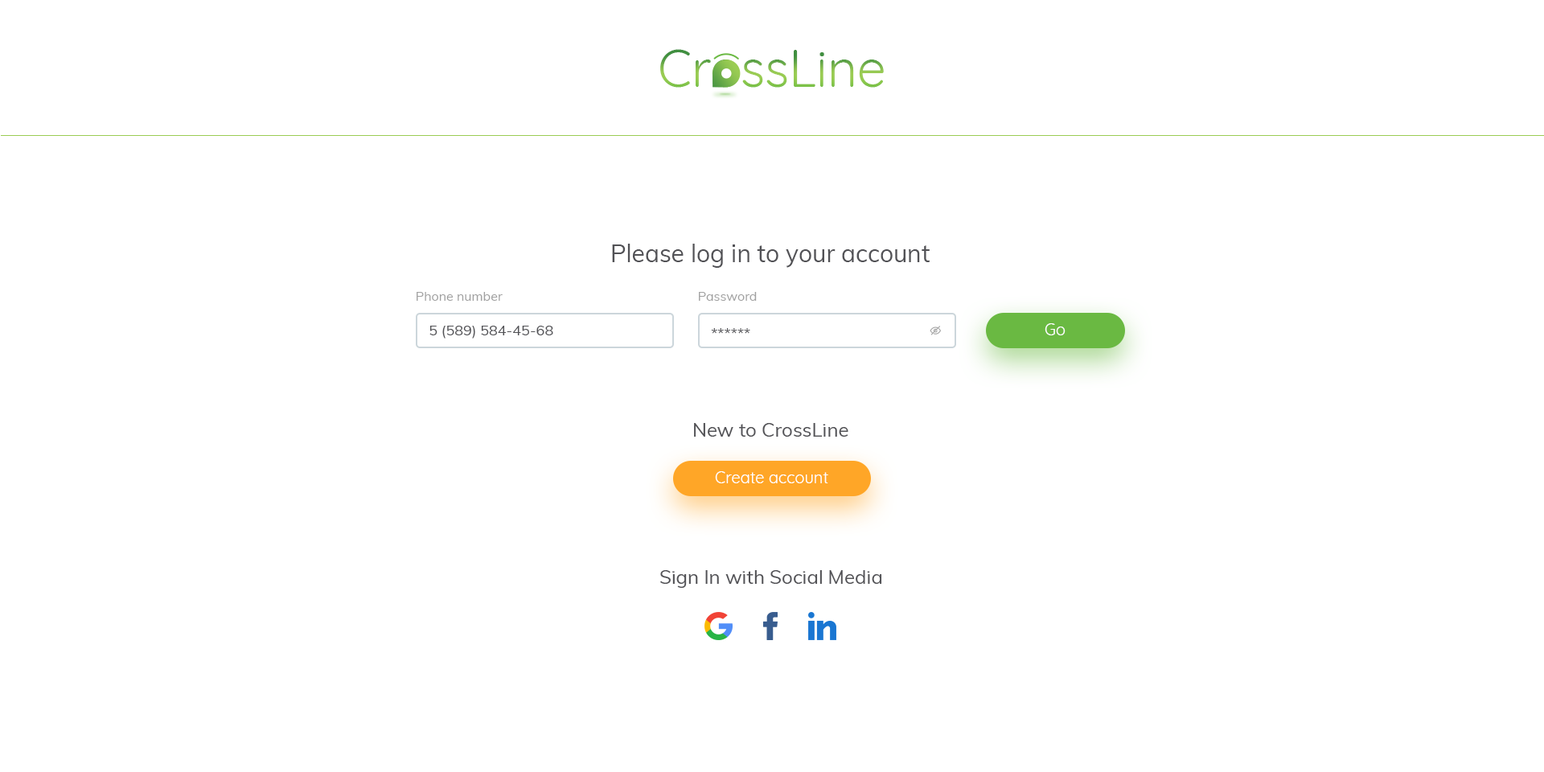
<style>
.page{position:relative;width:1544px;height:772px;background:#ffffff}
.page>*{position:absolute;margin:0}
.t1{font:51.6px "Quicksand-Regular"}
.t2{font:24.1px "Muli-Regular";color:#525256}
.t3{font:12.9px "Muli-Regular";color:#a1a1a1}
.t4{font:14.5px "Muli-Regular";color:#525256}
.t5{font:16.1px "Quicksand-Regular";color:#ffffff}
.t6{font:19.3px "Muli-Regular";color:#525256}
</style>
<div class="page">
<p class="t1" style="left:660px;top:49px;width:224px;height:39px">CrossLine</p>
<p class="t2" style="left:612px;top:244px;width:318px;height:24px">Please log in to your account</p>
<p class="t3" style="left:417px;top:292px;width:86px;height:9px">Phone number</p>
<p class="t3" style="left:699px;top:292px;width:58px;height:9px">Password</p>
<p class="t4" style="left:430px;top:326px;width:123px;height:13px">5 (589) 584-45-68</p>
<p class="t4" style="left:711px;top:328px;width:39px;height:6px">******</p>
<p class="t5" style="left:1045px;top:323px;width:21px;height:12px">Go</p>
<p class="t6" style="left:694px;top:423px;width:155px;height:14px">New to CrossLine</p>
<p class="t5" style="left:715px;top:471px;width:113px;height:12px">Create account</p>
<p class="t6" style="left:660px;top:570px;width:222px;height:18px">Sign In with Social Media</p>
</div>
